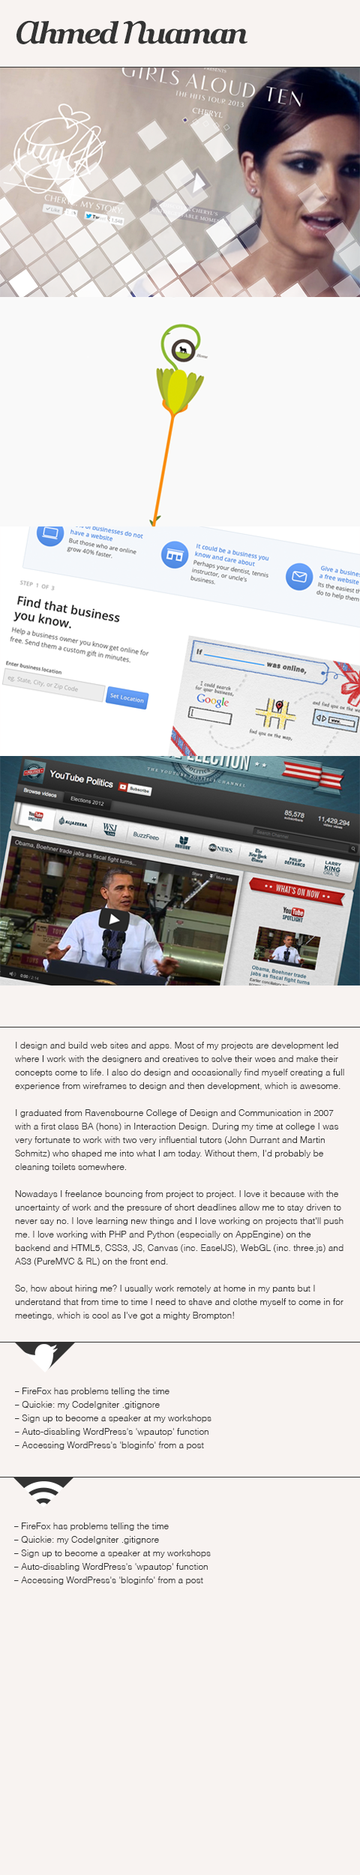
<style>
.page{position:relative;width:360px;height:1875px;background:#f8f3f1}
.page>*{position:absolute;margin:0}
.t1{font:29.9px "Georgia-BoldItalic";letter-spacing:-0.07em;color:#333333}
.t2{font:46.1px "Georgia-Italic";letter-spacing:-0.07em;color:#333333}
.t3{font:9px/13.5px "Helvetica-Light";color:#333333}
.t4{font:9px/13.5px "MyriadPro-Regular";color:#333333}
</style>
<div class="page">
<p class="t1" style="left:16px;top:20px;width:232px;height:24px"><span class="t2">a</span>hmed <span class="t2">n</span>uaman</p>
<p class="t3" style="left:15px;top:1042px;width:329px;height:278px">I design and build web sites and apps. Most of my projects are development led where I work with the designers and creatives to solve their woes and make their concepts come to life. I also do design and occasionally find myself creating a full experience from wireframes to design and then development, which is awesome.<br><br>I graduated from Ravensbourne College of Design and Communication in 2007 with a first class BA (hons) in Interaction Design. During my time at college I was very fortunate to work with two very influential tutors (John Durrant and Martin Schmitz) who shaped me into what I am today. Without them, I'd probably be cleaning toilets somewhere.<br><br>Nowadays I freelance bouncing from project to project. I love it because with the uncertainty of work and the pressure of short deadlines allow me to stay driven to never say no. I love learning new things and I love working on projects that'll push me. I love working with PHP and Python (especially on AppEngine) on the backend and HTML5, CSS3, JS, Canvas (inc. EaselJS), WebGL (inc. three.js) and AS3 (PureMVC &amp; RL) on the front end.<br><br>So, how about hiring me? I usually work remotely at home in my pants but I understand that from time to time I need to shave and clothe myself to come in for meetings, which is cool as I've got a mighty Brompton!</p>
<p class="t3" style="left:15px;top:1388px;width:197px;height:62px"><span class="t4">–</span> FireFox has problems telling the time<br><span class="t4">–</span> Quickie: my CodeIgniter .gitignore<br><span class="t4">–</span> Sign up to become a speaker at my workshops<br><span class="t4">–</span> Auto-disabling WordPress's 'wpautop' function<br><span class="t4">–</span> Accessing WordPress's 'bloginfo' from a post</p>
<p class="t3" style="left:14px;top:1522px;width:197px;height:63px"><span class="t4">–</span> FireFox has problems telling the time<br><span class="t4">–</span> Quickie: my CodeIgniter .gitignore<br><span class="t4">–</span> Sign up to become a speaker at my workshops<br><span class="t4">–</span> Auto-disabling WordPress's 'wpautop' function<br><span class="t4">–</span> Accessing WordPress's 'bloginfo' from a post</p>
</div>
